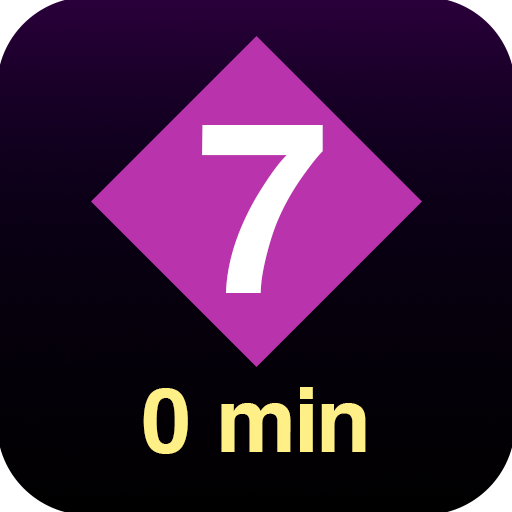
<style>
.page{position:relative;width:512px;height:512px}
.page>*{position:absolute;margin:0}
.t1{font:240px "Helvetica-Bold";color:#ffffff}
.t2{font:90px "Helvetica-Bold";color:#ffef87}
</style>
<div class="page">
<p class="t1" style="left:202px;top:125px;width:121px;height:168px">7</p>
<p class="t2" style="left:143px;top:387px;width:223px;height:67px">0 min</p>
</div>
